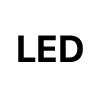
<style>
.page{position:relative;width:100px;height:100px;background:#ffffff}
.page>*{position:absolute;margin:0}
.t1{font:37.5px "SFProDisplay-Bold";color:#000000}
</style>
<div class="page">
<p class="t1" style="left:18px;top:35px;width:65px;height:27px">LED</p>
</div>
